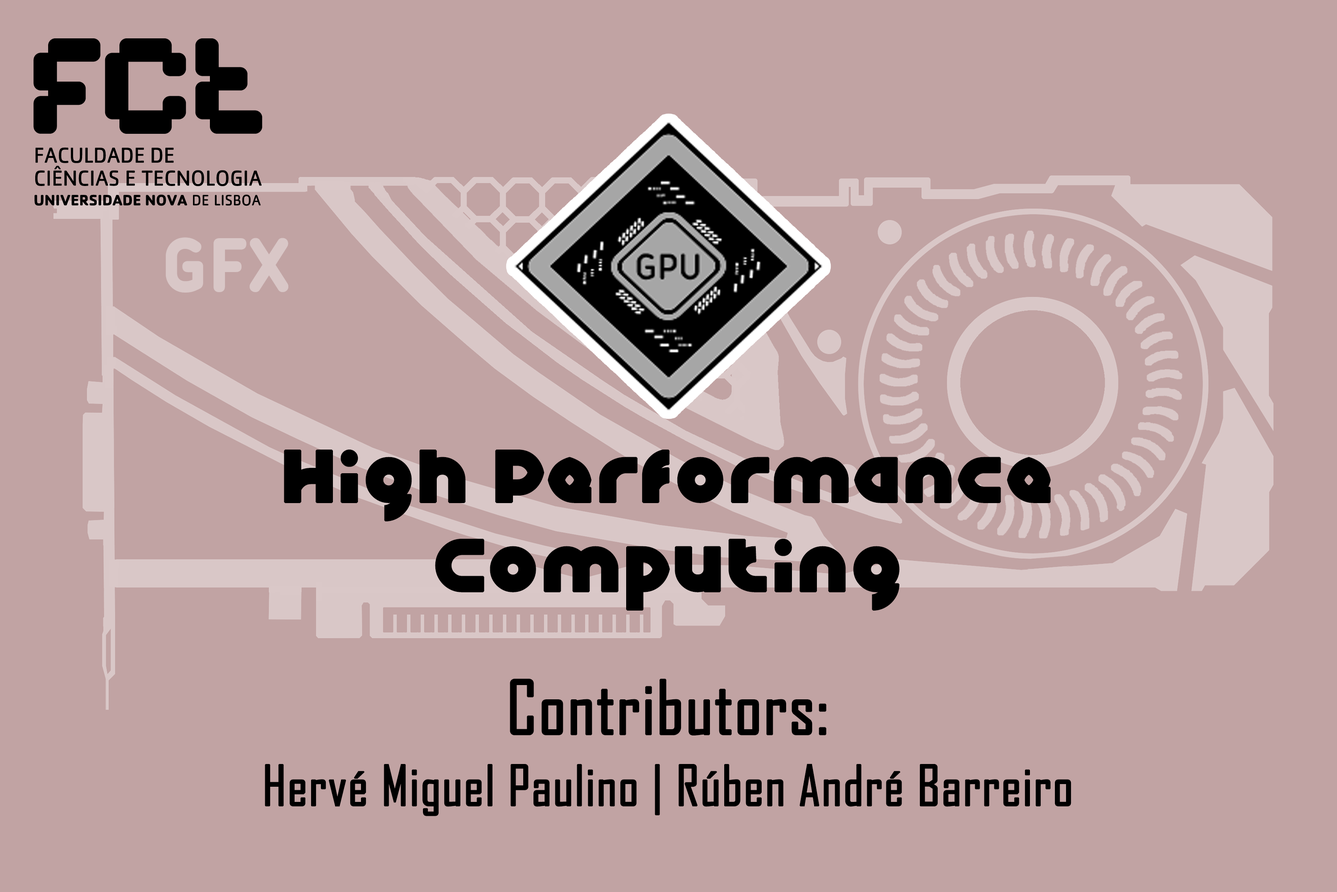
<style>
.page{position:relative;width:1337px;height:892px;background:#c1a3a3}
.page>*{position:absolute;margin:0}
.t1{font:80.2px "IconicTrial-Bold";color:#d9c7c7;font-weight:bold}
.t2{font:80.2px/89.2px "GAPHICDESIGN";color:#000000;font-weight:bold}
.t3{font:53.5px/71.3px "AgencyFB-Reg";color:#000000;font-weight:bold}
.t4{font:71.3px/71.3px "AgencyFB-Reg";color:#000000;font-weight:bold}
</style>
<div class="page">
<p class="t1" style="left:166px;top:237px;width:122px;height:55px">GFX</p>
<p class="t2" style="left:284px;top:449px;width:767px;height:161px;text-align:center">High Performance<br>Computing</p>
<p class="t3" style="left:265px;top:678px;width:807px;height:138px;text-align:center"><span class="t4">Contributors:<br></span>Hervé Miguel Paulino | Rúben André Barreiro</p>
</div>
